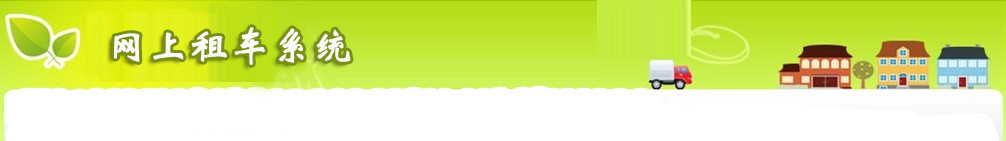
<style>
.page{position:relative;width:1006px;height:141px;background:#ffffff}
.page>*{position:absolute;margin:0}
.t1{font:40px "STXinwei";color:#fbf8f8;font-weight:bold}
</style>
<div class="page">
<p class="t1" style="left:114px;top:27px;width:237px;height:38px">网上租车系统</p>
</div>
